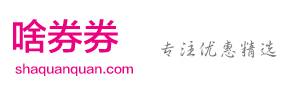
<style>
.page{position:relative;width:297px;height:90px;background:#ffffff}
.page>*{position:absolute;margin:0}
.t1{font:36px "FZLTZHK--GBK1-0";color:#eb027f}
.t2{font:12px "FZLTZHK--GBK1-0";color:#eb027f}
</style>
<div class="page">
<p class="t1" style="left:13px;top:19px;width:105px;height:35px">啥券券</p>
<p class="t2" style="left:15px;top:63px;width:118px;height:13px">shaquanquan.com</p>
</div>
